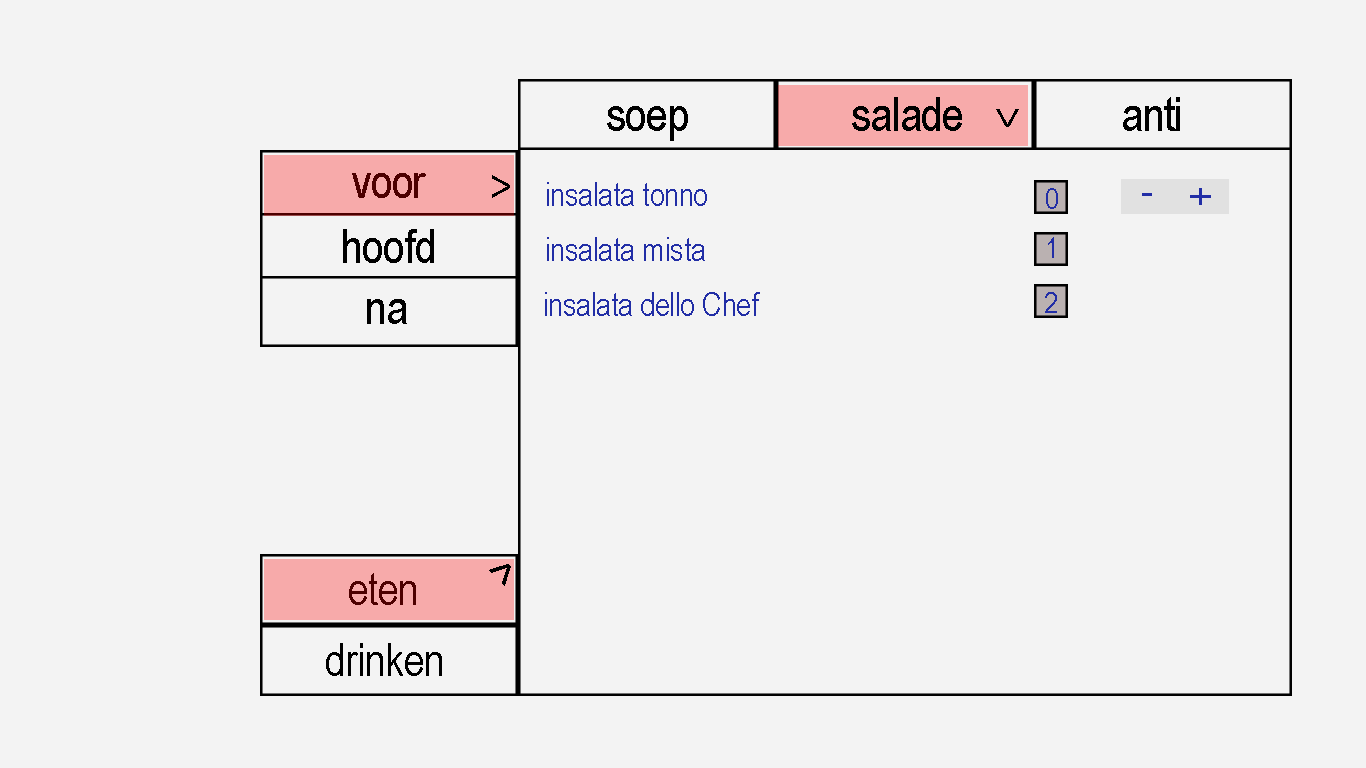
<style>
.page{position:relative;width:1366px;height:768px;background:#f3f3f3}
.page>*{position:absolute;margin:0}
.t1{font:48px "ArialNarrow";letter-spacing:-0.015em;color:#000000}
.t2{font:46px "ArialNarrow";letter-spacing:-0.015em;color:#000000}
.t3{font:48px "ArialNarrow";letter-spacing:-0.015em;color:#4d0000}
.t4{font:33px "ArialNarrow";letter-spacing:-0.015em;color:#222ea6}
.t5{font:30px "ArialNarrow";letter-spacing:-0.015em;color:#222ea6}
.t6{font:46px "ArialNarrow";letter-spacing:-0.015em;color:#4d0000}
</style>
<div class="page">
<p class="t1" style="left:852px;top:97px;width:110px;height:34px">salade</p>
<p class="t1" style="left:1123px;top:97px;width:57px;height:34px">anti</p>
<p class="t1" style="left:607px;top:106px;width:81px;height:35px">soep</p>
<p class="t2" style="left:996px;top:109px;width:23px;height:18px;rotate:90deg">&gt;</p>
<p class="t3" style="left:352px;top:173px;width:74px;height:25px">voor</p>
<p class="t2" style="left:492px;top:175px;width:18px;height:23px">&gt;</p>
<p class="t4" style="left:547px;top:182px;width:160px;height:24px">insalata tonno</p>
<p class="t5" style="left:1046px;top:188px;width:12px;height:21px">0</p>
<p class="t1" style="left:343px;top:229px;width:91px;height:34px">hoofd</p>
<p class="t4" style="left:547px;top:237px;width:158px;height:24px">insalata mista</p>
<p class="t5" style="left:1048px;top:237px;width:6px;height:21px">1</p>
<p class="t4" style="left:545px;top:292px;width:215px;height:24px">insalata dello Chef</p>
<p class="t5" style="left:1045px;top:292px;width:12px;height:21px">2</p>
<p class="t1" style="left:367px;top:299px;width:40px;height:25px">na</p>
<p class="t2" style="left:489px;top:564px;width:22px;height:22px;rotate:-45deg">&gt;</p>
<p class="t6" style="left:349px;top:573px;width:67px;height:32px">eten</p>
<p class="t2" style="left:326px;top:643px;width:116px;height:33px">drinken</p>
</div>
